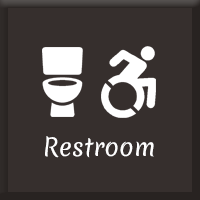
<style>
.page{position:relative;width:200px;height:200px;background:#362f2d}
.page>*{position:absolute;margin:0}
.t1{font:24px "Merienda-Regular_0_wt";color:#ffffff}
</style>
<div class="page">
<p class="t1" style="left:45px;top:136px;width:109px;height:22px">Restroom</p>
</div>
